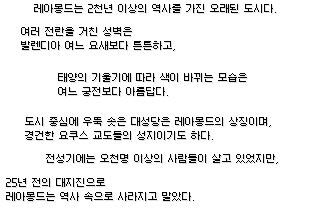
<style>
.page{position:relative;width:320px;height:210px;background:#ffffff}
.page>*{position:absolute;margin:0}
.t1{font:10px "Galmuri9-Regular";color:#000000}
.t2{font:10px/14px "Galmuri9-Regular";color:#000000}
</style>
<div class="page">
<p class="t1" style="left:34px;top:4px;width:242px;height:10px">레아몽드는 2천년 이상의 역사를 가진 오래된 도시다.</p>
<p class="t2" style="left:21px;top:27px;width:155px;height:24px">여러 전란을 거친 성벽은 <br>발렌디아 여느 요새보다 튼튼하고,</p>
<p class="t2" style="left:58px;top:73px;width:190px;height:23px">태양의 기울기에 따라 색이 바뀌는 모습은  <br>여느 궁전보다 아름답다.</p>
<p class="t2" style="left:25px;top:117px;width:246px;height:23px">도시 중심에 우뚝 솟은 대성당은 레아몽드의 상징이며,<br>경건한 요쿠스 교도들의 성지이기도 하다.</p>
<p class="t1" style="left:46px;top:154px;width:232px;height:10px">전성기에는 오천명 이상의 사람들이 살고 있었지만,</p>
<p class="t2" style="left:6px;top:178px;width:189px;height:23px">25년 전의 대지진으로<br>레아몽드는 역사 속으로 사라지고 말았다.</p>
</div>
